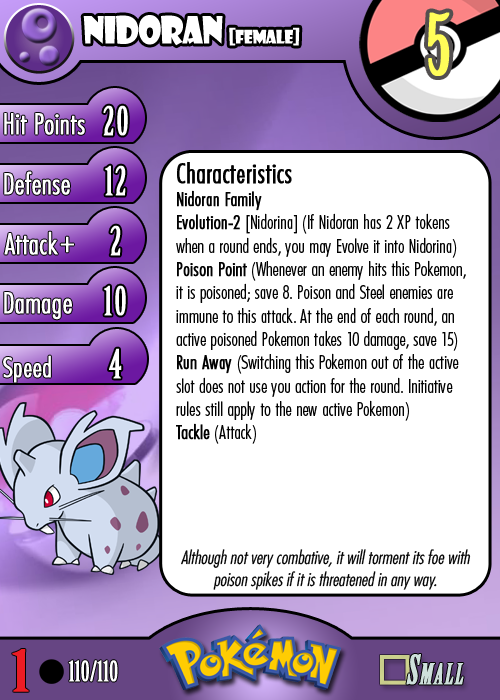
<style>
.page{position:relative;width:500px;height:700px;background:#ffffff}
.page>*{position:absolute;margin:0}
.t1{font:18.3px "ShowcardGothic-Reg";letter-spacing:-0.025em;color:#ffffff;scale:0.91 1}
.t2{font:36.7px "ShowcardGothic-Reg";letter-spacing:-0.025em;color:#ffffff;scale:0.91 1}
.t3{font:83.3px "BirchStd";letter-spacing:0.025em;color:#fffd59;font-weight:bold}
.t4{font:27.8px "Futura-CondensedLight";color:#ffffff;font-weight:bold}
.t5{font:38.9px "BirchStd";letter-spacing:0.035em;color:#ffffff;font-weight:bold}
.t6{font:19.4px "FuturaCondensedBQ-Light";color:#010101}
.t7{font:27.8px "FuturaCondensedBQ-Light";color:#010101;font-weight:bold}
.t8{font:19.4px "FuturaCondensedBQ-Light";color:#010101;font-weight:bold}
.t9{font:30.6px "Futura-CondensedLight";color:#ffffff;font-weight:bold}
.t10{font:27.8px "FuturaCondensedBQ-Light";color:#ffffff;font-weight:bold}
.t11{font:18.1px "Futura-CondensedLight";color:#010101;font-style:italic}
.t12{font:55.6px "BirchStd";color:#ed1c24;font-weight:bold;scale:1.5 1}
.t13{font:27.8px "BirchStd";color:#ffffff;font-weight:bold}
</style>
<div class="page">
<p class="t1" style="left:83px;top:15px;width:217px;height:31px"><span class="t2">nidoran </span>[female]</p>
<p class="t3" style="left:428px;top:12px;width:22px;height:64px">5</p>
<p class="t4" style="left:4px;top:113px;width:81px;height:22px">Hit Points</p>
<p class="t5" style="left:103px;top:105px;width:25px;height:31px">20</p>
<p class="t4" style="left:4px;top:171px;width:66px;height:24px">Defense</p>
<p class="t5" style="left:105px;top:165px;width:21px;height:31px">12</p>
<p class="t6" style="left:176px;top:162px;width:290px;height:282px"><span class="t7">Characteristics<br></span><span class="t8">Nidoran Family<br>Evolution-2 </span>[Nidorina] (If Nidoran has 2 XP tokens when a round ends, you may Evolve it into Nidorina)<br><span class="t8">Poison Point</span> (Whenever an enemy hits this Pokemon, it is poisoned; save 8. Poison and Steel enemies are immune to this attack. At the end of each round, an active poisoned Pokemon takes 10 damage, save 15)<br><span class="t8">Run Away</span> (Switching this Pokemon out of the active slot does not use you action for the round. Initiative rules still apply to the new active Pokemon)<br><span class="t8">Tackle</span> (Attack)</p>
<p class="t4" style="left:4px;top:231px;width:54px;height:24px">Attack</p>
<p class="t5" style="left:110px;top:225px;width:11px;height:31px">2</p>
<p class="t9" style="left:60px;top:236px;width:14px;height:17px">+</p>
<p class="t4" style="left:4px;top:292px;width:68px;height:28px">Damage</p>
<p class="t5" style="left:104px;top:285px;width:22px;height:31px">10</p>
<p class="t5" style="left:109px;top:348px;width:13px;height:31px">4</p>
<p class="t10" style="left:3px;top:355px;width:48px;height:28px">Speed</p>
<p class="t11" style="left:181px;top:549px;width:290px;height:41px;text-align:center">Although not very combative, it will torment its foe with poison spikes if it is threatened in any way.</p>
<p class="t12" style="left:12px;top:649px;width:17px;height:43px">1</p>
<p class="t13" style="left:68px;top:660px;width:50px;height:22px">110/110</p>
</div>
